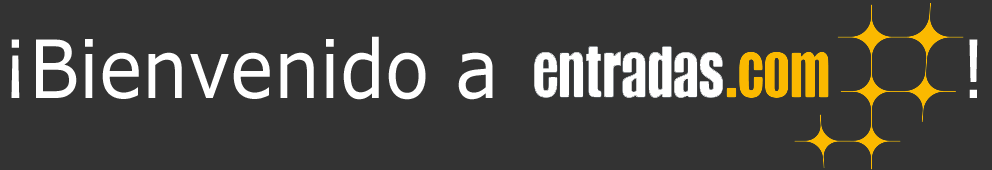
<style>
.page{position:relative;width:992px;height:170px;background:#333333}
.page>*{position:absolute;margin:0}
.t1{font:80.6px "Verdana";color:#ffffff;scale:0.9 1}
</style>
<div class="page">
<p class="t1" style="left:11px;top:36px;width:967px;height:64px">¡Bienvenido a                  !</p>
</div>
